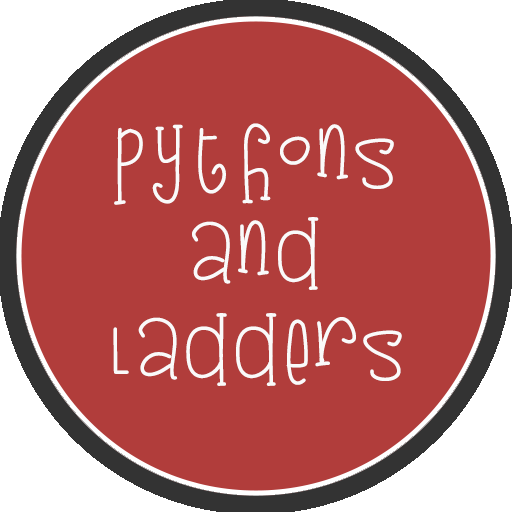
<style>
.page{position:relative;width:512px;height:512px;background:#b13d3b}
.page>*{position:absolute;margin:0}
.t1{font:80px "KB3SugarplumSwirls";color:#fafafa}
</style>
<div class="page">
<p class="t1" style="left:113px;top:123px;width:289px;height:263px;text-align:center">pythons<br>and<br>ladders</p>
</div>
